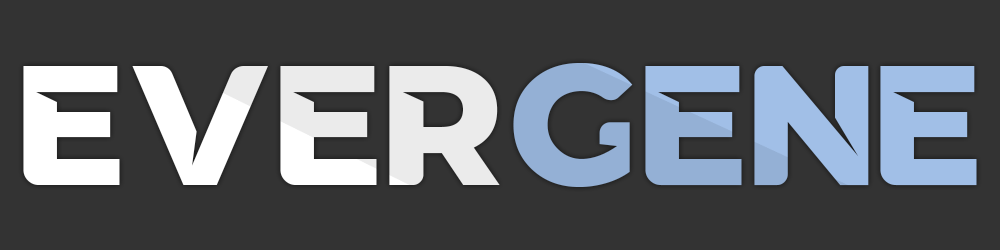
<style>
.page{position:relative;width:1000px;height:250px;background:#333333}
.page>*{position:absolute;margin:0}
.t1{font:217.1px "WallmanLoveBold";color:#ffffff}
.t2{font:217.1px "WallmanLoveBold";color:#a1bfe7}
</style>
<div class="page">
<p class="t1" style="left:23px;top:63px;width:954px;height:124px">EVER<span class="t2">GENE</span></p>
</div>
